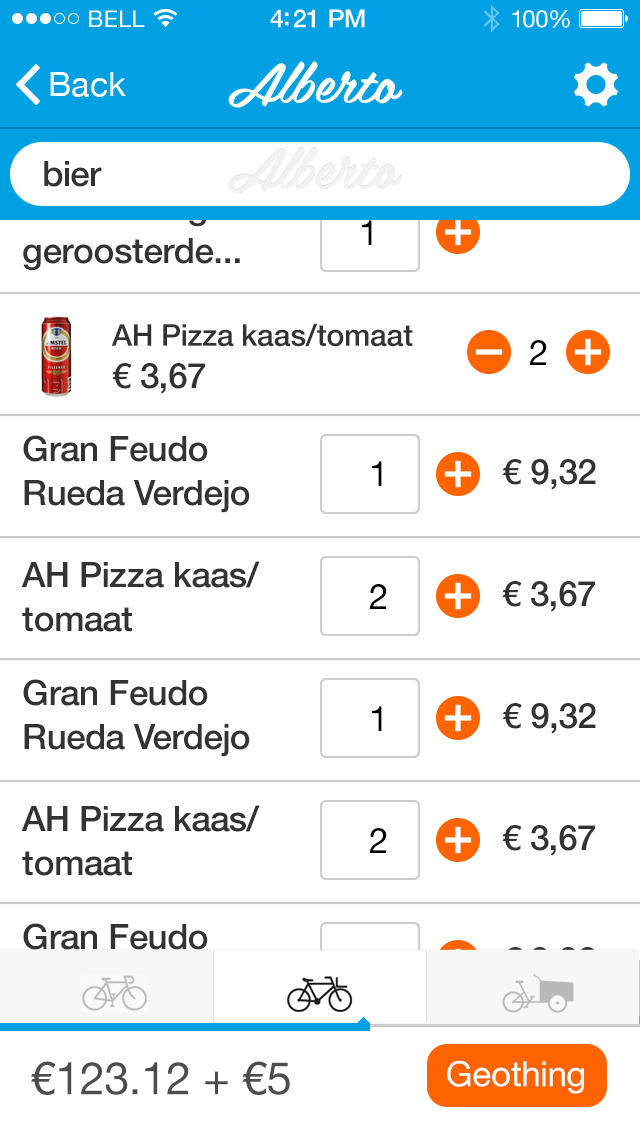
<style>
.page{position:relative;width:640px;height:1136px;background:#ffffff}
.page>*{position:absolute;margin:0}
.t1{font:56px "Belinda";color:#ffffff}
.t2{font:35px "HelveticaNeue-Medium";letter-spacing:-0.01em;color:#333333}
.t3{font:35px/44px "HelveticaNeue-Medium";letter-spacing:-0.01em}
.t4{font:35px "HelveticaNeue";letter-spacing:-0.01em;color:#000000}
.t5{font:30px "HelveticaNeue-Medium";letter-spacing:-0.01em;color:#333333}
.t6{font:35px/44px "HelveticaNeue-Medium";letter-spacing:-0.01em;color:#333333}
.t7{font:45px "HelveticaNeue";letter-spacing:-0.01em;color:#4d4d4d}
.t8{font:35px "HelveticaNeue";letter-spacing:-0.01em;color:#ffffff}
</style>
<div class="page">
<p class="t1" style="left:228px;top:61px;width:175px;height:47px">Alberto</p>
<p class="t2" style="left:44px;top:161px;width:58px;height:26px">bier</p>
<p class="t3" style="left:23px;top:194px;width:247px;height:77px">Leev Biologisch geroosterde...</p>
<p class="t4" style="left:362px;top:220px;width:10px;height:25px">1</p>
<p class="t5" style="left:111px;top:323px;width:302px;height:24px">AH Pizza kaas/tomaat</p>
<p class="t4" style="left:529px;top:340px;width:18px;height:25px">2</p>
<p class="t2" style="left:112px;top:363px;width:93px;height:31px">€ 3,67</p>
<p class="t6" style="left:23px;top:435px;width:227px;height:78px">Gran Feudo Rueda Verdejo</p>
<p class="t4" style="left:372px;top:461px;width:10px;height:25px">1</p>
<p class="t2" style="left:502px;top:459px;width:94px;height:31px">€ 9,32</p>
<p class="t6" style="left:21px;top:561px;width:239px;height:71px">AH Pizza kaas/ tomaat</p>
<p class="t2" style="left:502px;top:581px;width:93px;height:31px">€ 3,67</p>
<p class="t4" style="left:369px;top:584px;width:18px;height:25px">2</p>
<p class="t6" style="left:23px;top:679px;width:227px;height:78px">Gran Feudo Rueda Verdejo</p>
<p class="t4" style="left:372px;top:706px;width:10px;height:25px">1</p>
<p class="t2" style="left:502px;top:703px;width:94px;height:31px">€ 9,32</p>
<p class="t6" style="left:21px;top:805px;width:239px;height:71px">AH Pizza kaas/ tomaat</p>
<p class="t4" style="left:369px;top:828px;width:18px;height:25px">2</p>
<p class="t2" style="left:502px;top:825px;width:93px;height:31px">€ 3,67</p>
<p class="t3" style="left:23px;top:923px;width:227px;height:78px">Gran Feudo Rueda Verdejo</p>
<p class="t7" style="left:31px;top:1061px;width:259px;height:34px">€123.12 + €5</p>
<p class="t8" style="left:447px;top:1060px;width:137px;height:34px">Geothing</p>
</div>
